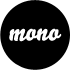
<style>
.page{position:relative;width:70px;height:70px;background:#000000}
.page>*{position:absolute;margin:0}
.t1{font:26px "Bello-Script";color:#ffffff}
</style>
<div class="page">
<p class="t1" style="left:9px;top:28px;width:53px;height:14px">mono</p>
</div>
